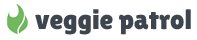
<style>
.page{position:relative;width:197px;height:40px;background:#ffffff}
.page>*{position:absolute;margin:0}
.t1{font:28px "LilitaOne";color:#3e454f}
</style>
<div class="page">
<p class="t1" style="left:35px;top:9px;width:156px;height:26px">veggie patrol</p>
</div>
